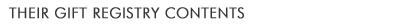
<style>
.page{position:relative;width:400px;height:24px;background:#ffffff}
.page>*{position:absolute;margin:0}
.t1{font:14.7px "FuturaBT-Light";letter-spacing:0.025em;color:#363636;text-transform:uppercase;font-weight:bold}
</style>
<div class="page">
<p class="t1" style="left:9px;top:7px;width:235px;height:12px">their gift registry contents</p>
</div>
